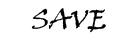
<style>
.page{position:relative;width:140px;height:40px;background:#ffffff}
.page>*{position:absolute;margin:0}
.t1{font:26.7px "VinerHandITC";color:#000000}
</style>
<div class="page">
<p class="t1" style="left:31px;top:8px;width:75px;height:25px">SAVE</p>
</div>
